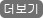
<style>
.page{position:relative;width:43px;height:18px;background:#707070}
.page>*{position:absolute;margin:0}
.t1{font:12px "Gulim";color:#ffffff}
</style>
<div class="page">
<p class="t1" style="left:4px;top:4px;width:34px;height:10px">더보기</p>
</div>
